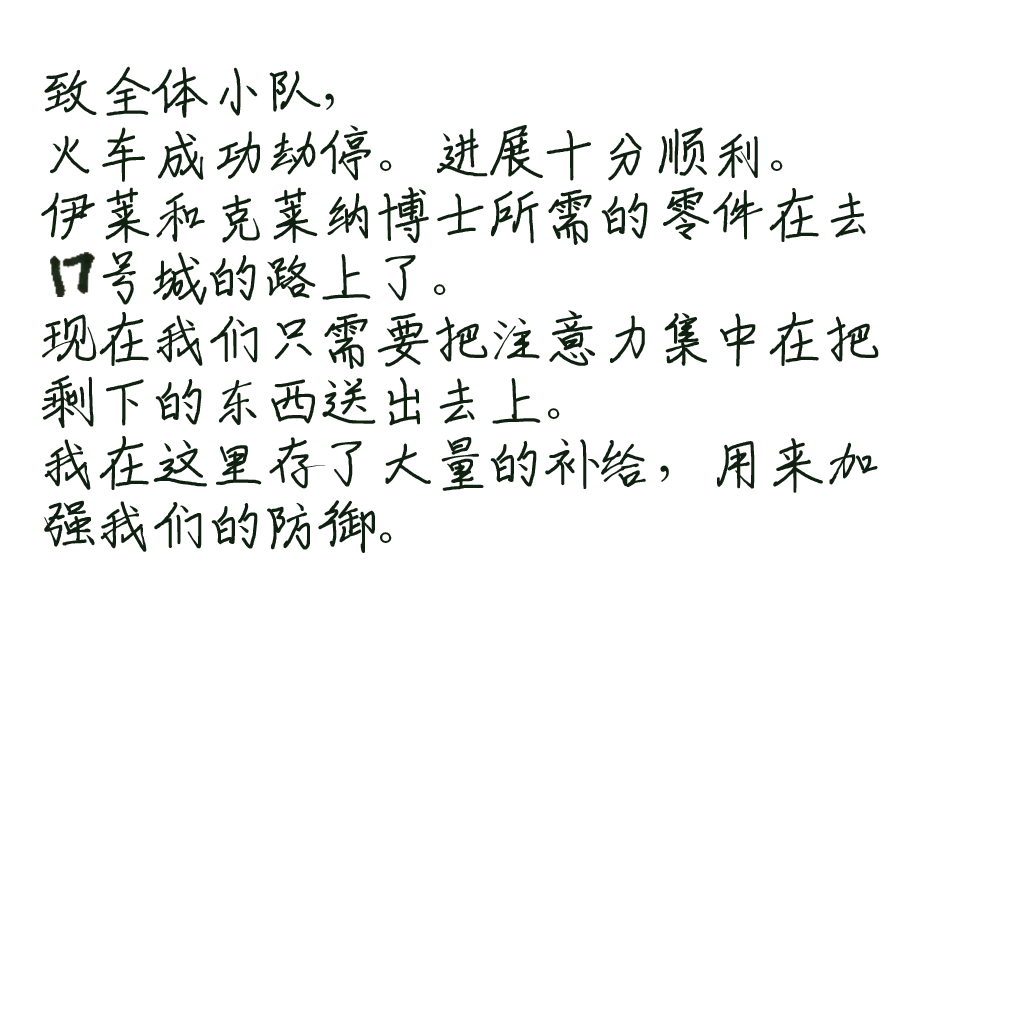
<style>
.page{position:relative;width:1024px;height:1024px;background:#ffffff}
.page>*{position:absolute;margin:0}
.t1{font:62px/62px "ShouShuti";letter-spacing:-0.1em;color:#102010}
</style>
<div class="page">
<p class="t1" style="left:41px;top:66px;width:838px;height:487px">致全体小队，<br>火车成功劫停。进展十分顺利。<br>伊莱和克莱纳博士所需的零件在去<br>      号城的路上了。<br>现在我们只需要把注意力集中在把<br>剩下的东西送出去上。<br>我在这里存了大量的补给，用来加<br>强我们的防御。</p>
</div>
